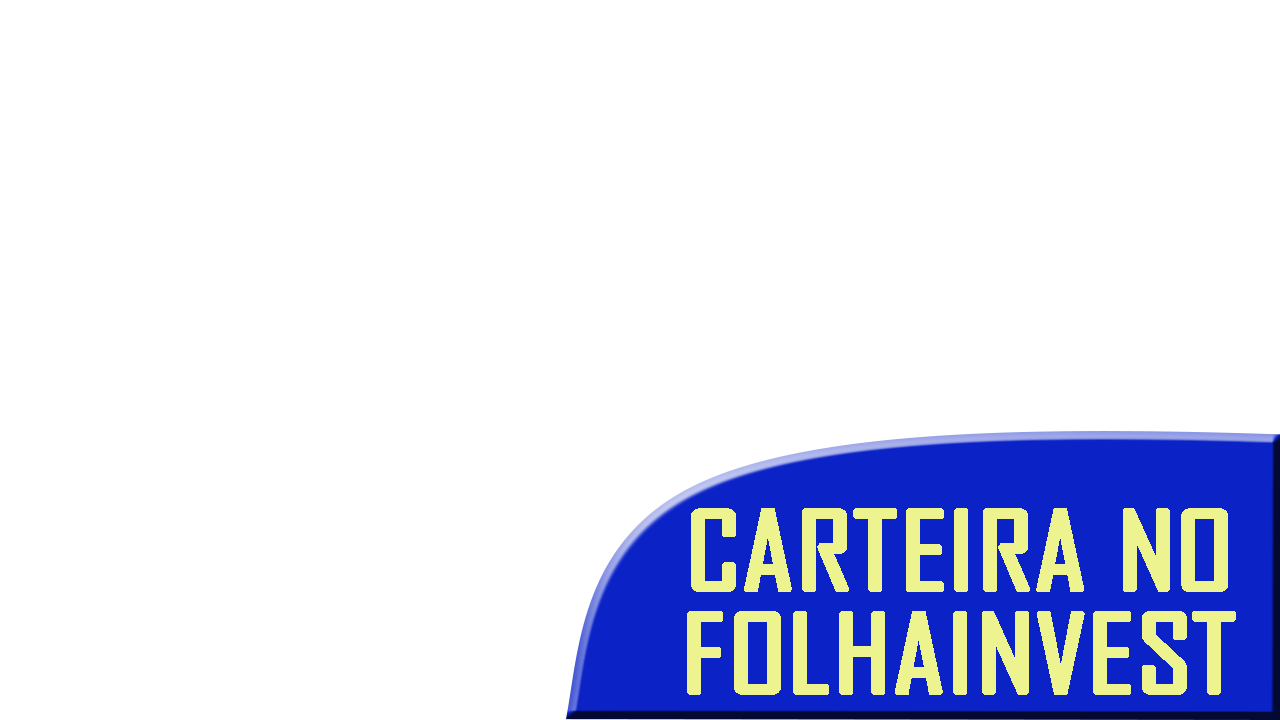
<style>
.page{position:relative;width:1280px;height:720px;background:#ffffff}
.page>*{position:absolute;margin:0}
.t1{font:102.6px "AgencyFB-Reg";color:#edf38e;text-transform:uppercase;font-weight:bold;scale:1.23 1}
</style>
<div class="page">
<p class="t1" style="left:687px;top:508px;width:549px;height:187px;text-align:center">Carteira no<br>folhainvest</p>
</div>
